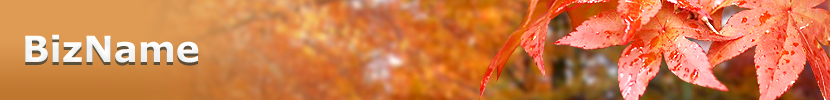
<style>
.page{position:relative;width:830px;height:100px}
.page>*{position:absolute;margin:0}
.t1{font:36px "Verdana-Bold";color:#ffffff}
</style>
<div class="page">
<p class="t1" style="left:25px;top:34px;width:174px;height:29px">BizName</p>
</div>
